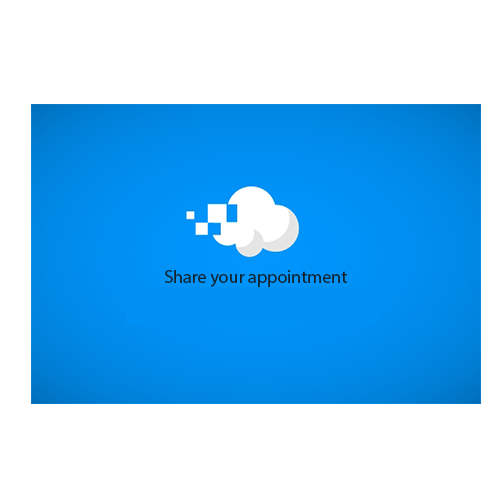
<style>
.page{position:relative;width:500px;height:500px;background:#ffffff}
.page>*{position:absolute;margin:0}
.t1{font:18px "MyriadPro-Regular";color:#132531}
</style>
<div class="page">
<p class="t1" style="left:165px;top:270px;width:183px;height:17px">Share your appointment</p>
</div>
